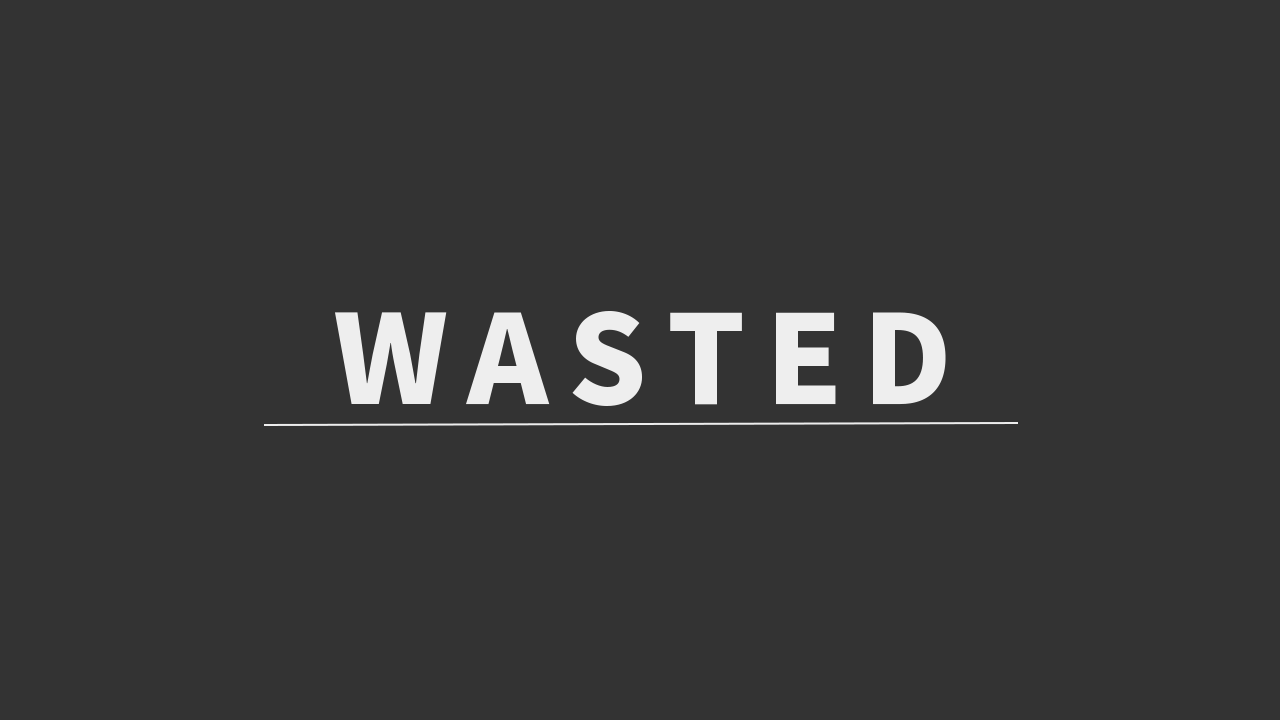
<style>
.page{position:relative;width:1280px;height:720px;background:#333333}
.page>*{position:absolute;margin:0}
.t1{font:123px "SourceHanSansJP-Heavy";letter-spacing:0.16em;color:#eeeeee}
</style>
<div class="page">
<p class="t1" style="left:335px;top:311px;width:611px;height:95px">WASTED</p>
</div>
